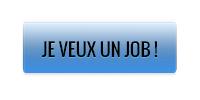
<style>
.page{position:relative;width:200px;height:100px;background:#ffffff}
.page>*{position:absolute;margin:0}
.t1{font:18px "Oswald-Regular";color:#000000}
</style>
<div class="page">
<p class="t1" style="left:42px;top:41px;width:115px;height:17px">JE VEUX UN JOB !</p>
</div>
